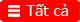
<style>
.page{position:relative;width:80px;height:22px;background:#fe0000}
.page>*{position:absolute;margin:0}
.t1{font:15.2px "Tahoma";color:#ffffff}
</style>
<div class="page">
<p class="t1" style="left:25px;top:4px;width:44px;height:12px">Tất cả</p>
</div>
